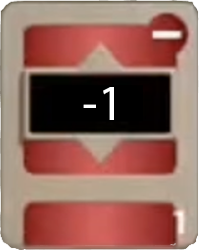
<style>
.page{position:relative;width:199px;height:250px}
.page>*{position:absolute;margin:0}
.t1{font:50px "MyriadPro-Regular";color:#ffffff}
</style>
<div class="page">
<p class="t1" style="left:83px;top:87px;width:31px;height:33px">-1</p>
</div>
